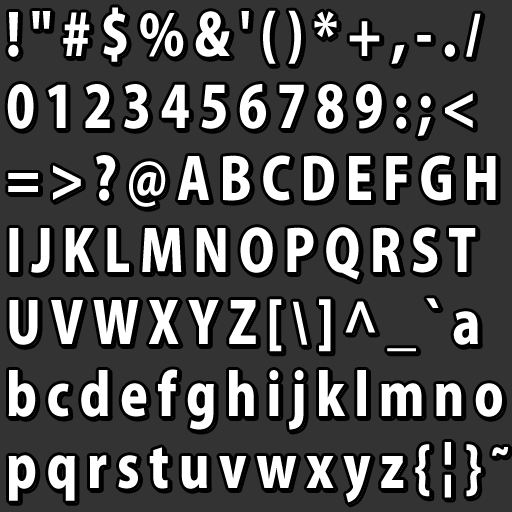
<style>
.page{position:relative;width:512px;height:512px;background:#333333}
.page>*{position:absolute;margin:0}
.t1{font:57px/72px "KozGoPro-Heavy";letter-spacing:0.168em;color:#ffffff;scale:0.88 1}
.t2{font:58px/72px "Arial-BoldMT";letter-spacing:0.168em;color:#ffffff;scale:0.88 1}
</style>
<div class="page">
<p class="t1" style="left:7px;top:7px;width:501px;height:496px">!"#$%&amp;'()*+,-.<span class="t2">/<br></span>0123456789:;&lt;<br>=&gt;?@ABCDEFGH<br>IJKLMNOPQRST<br>UVWXYZ[<span class="t2">\</span>]^_`a<br>bcdefghijklmno<br>pqrstuvwxyz{|}~</p>
<p class="t1" style="left:9px;top:9px;width:501px;height:496px">!"#$%&amp;'()*+,-.<span class="t2">/<br></span>0123456789:;&lt;<br>=&gt;?@ABCDEFGH<br>IJKLMNOPQRST<br>UVWXYZ[<span class="t2">\</span>]^_`a<br>bcdefghijklmno<br>pqrstuvwxyz{|}~</p>
</div>
